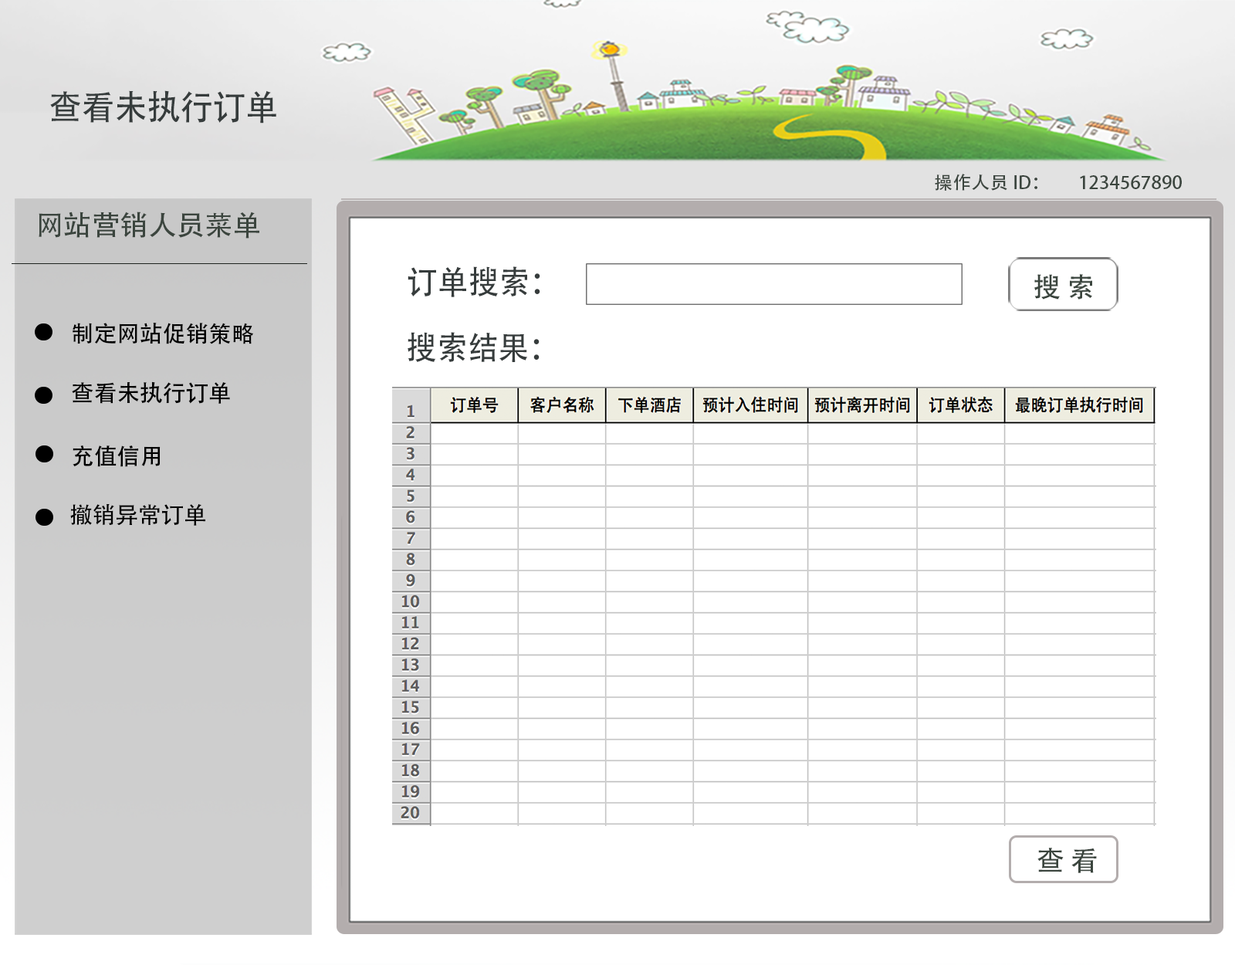
<style>
.page{position:relative;width:1235px;height:965px;background:#ffffff}
.page>*{position:absolute;margin:0}
.t1{font:34.3px "AdobeHeitiStd-Regular";letter-spacing:-0.005em;color:#363c3c;text-transform:uppercase;scale:0.96 1}
.t2{font:17.8px "AdobeHeitiStd-Regular";color:#3b453e;scale:1.04 1}
.t3{font:28.1px "AdobeHeitiStd-Regular";color:#3b453e}
.t4{font:32.2px "AdobeHeitiStd-Regular";letter-spacing:-0.005em;color:#363c3c;text-transform:uppercase;scale:0.96 1}
.t5{font:22.8px "AdobeHeitiStd-Regular";color:#010101}
.t6{font:22.8px "AdobeHeitiStd-Regular";color:#000000}
.t7{font:22.8px "AdobeHeitiStd-Regular";letter-spacing:-0.005em;color:#000000;text-transform:uppercase}
</style>
<div class="page">
<p class="t1" style="left:50px;top:90px;width:226px;height:34px">查看未执行订单</p>
<p class="t2" style="left:935px;top:174px;width:247px;height:17px">操作人员ID：        1234567890</p>
<p class="t3" style="left:39px;top:212px;width:220px;height:27px">网站营销人员菜单</p>
<p class="t4" style="left:408px;top:266px;width:133px;height:31px">订单搜索：</p>
<p class="t5" style="left:73px;top:323px;width:180px;height:21px">制定网站促销策略</p>
<p class="t4" style="left:408px;top:332px;width:132px;height:30px">搜索结果：</p>
<p class="t6" style="left:72px;top:381px;width:158px;height:23px">查看未执行订单</p>
<p class="t6" style="left:73px;top:446px;width:88px;height:21px">充值信用</p>
<p class="t7" style="left:70px;top:504px;width:135px;height:22px">撤销异常订单</p>
</div>
